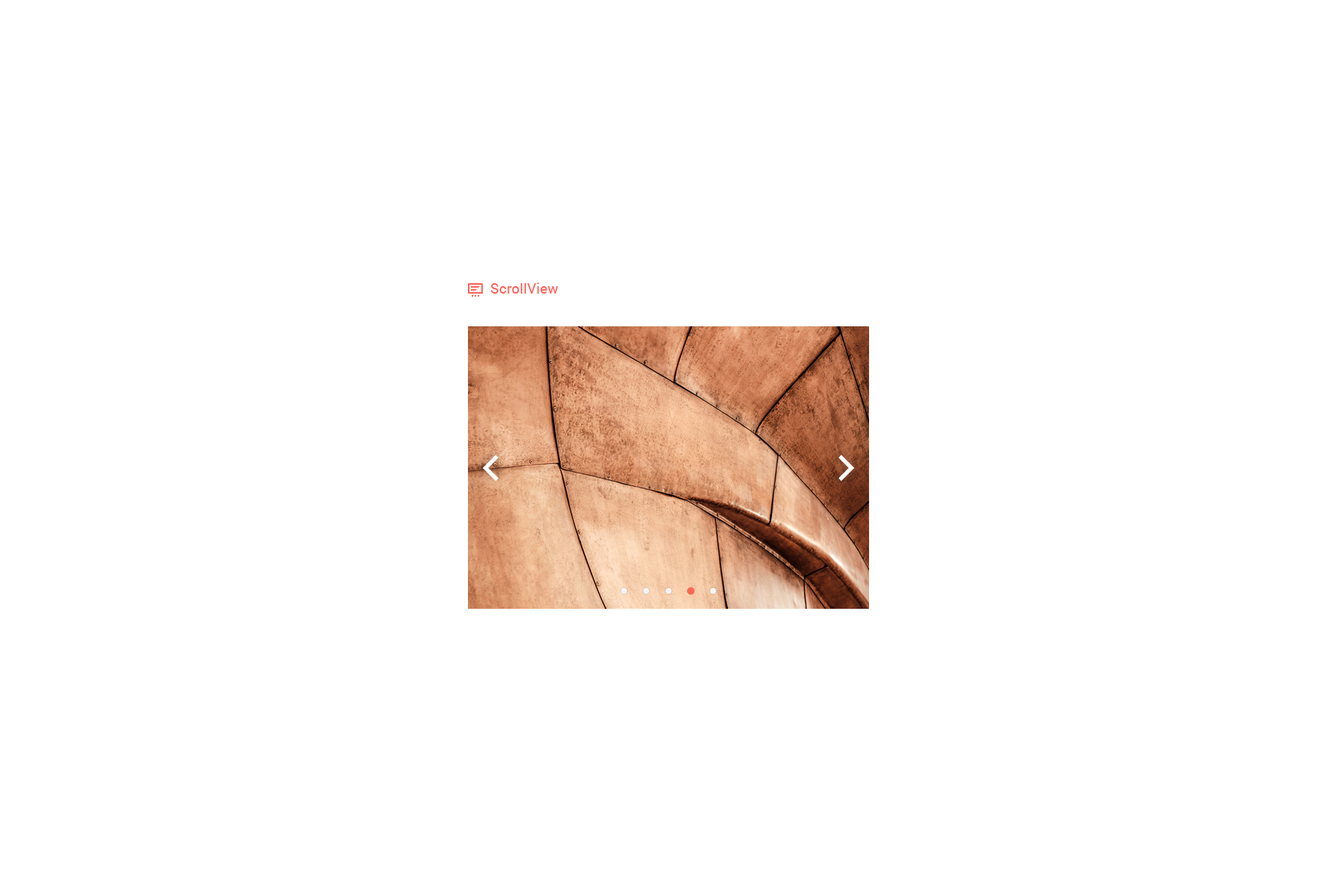
<style>
.page{position:relative;width:1337px;height:892px;background:#ffffff}
.page>*{position:absolute;margin:0}
.t1{font:14.1px "Roboto-Regular";letter-spacing:0.01em;color:#ff6358}
</style>
<div class="page">
<p class="t1" style="left:491px;top:282px;width:68px;height:11px">ScrollView</p>
</div>
